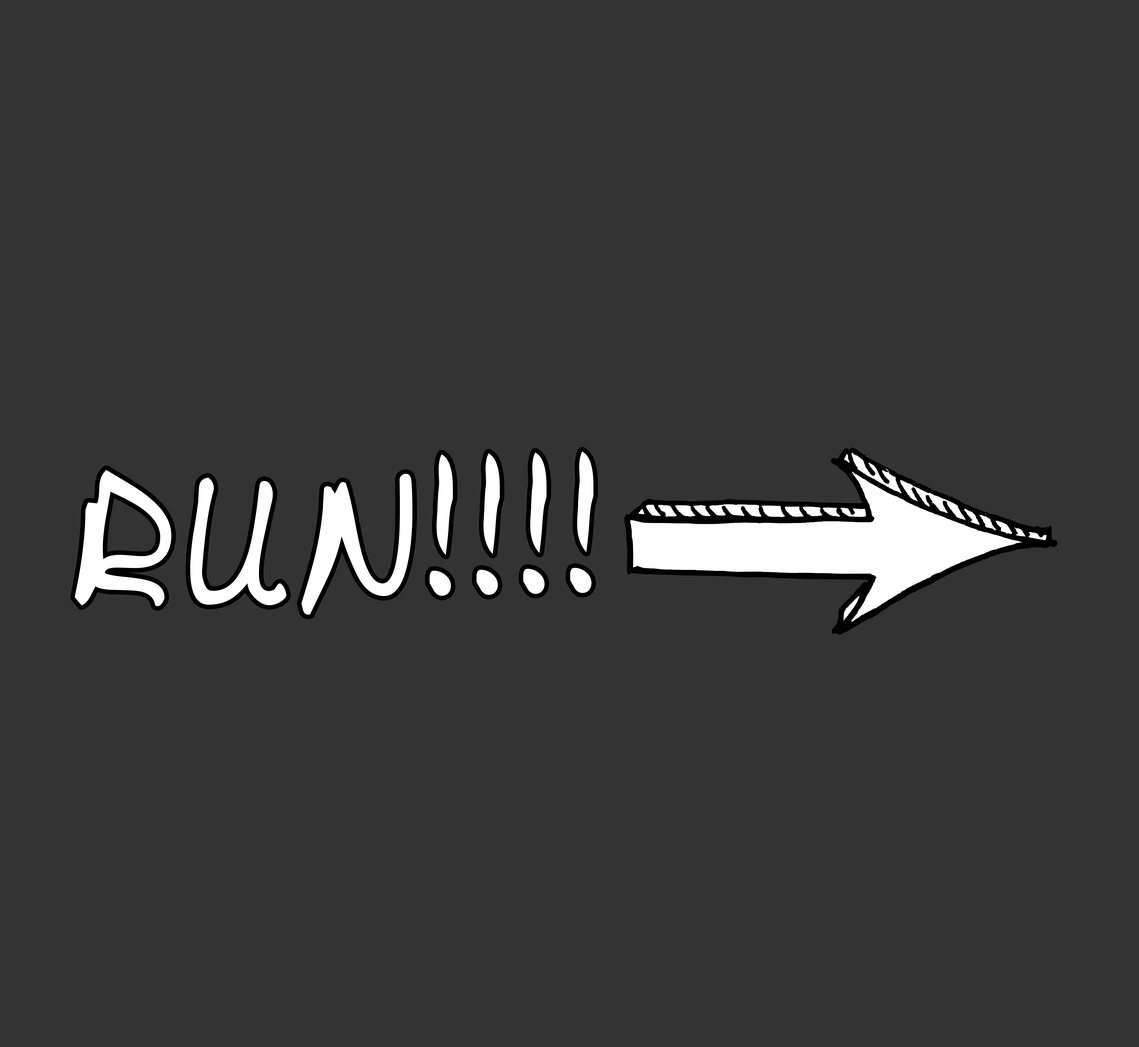
<style>
.page{position:relative;width:1139px;height:1047px;background:#333333}
.page>*{position:absolute;margin:0}
.t1{font:172.8px "DomesticManners";letter-spacing:0.04em;color:#ffffff}
</style>
<div class="page">
<p class="t1" style="left:75px;top:452px;width:518px;height:163px;rotate:-1deg">RUN!!!!</p>
</div>
